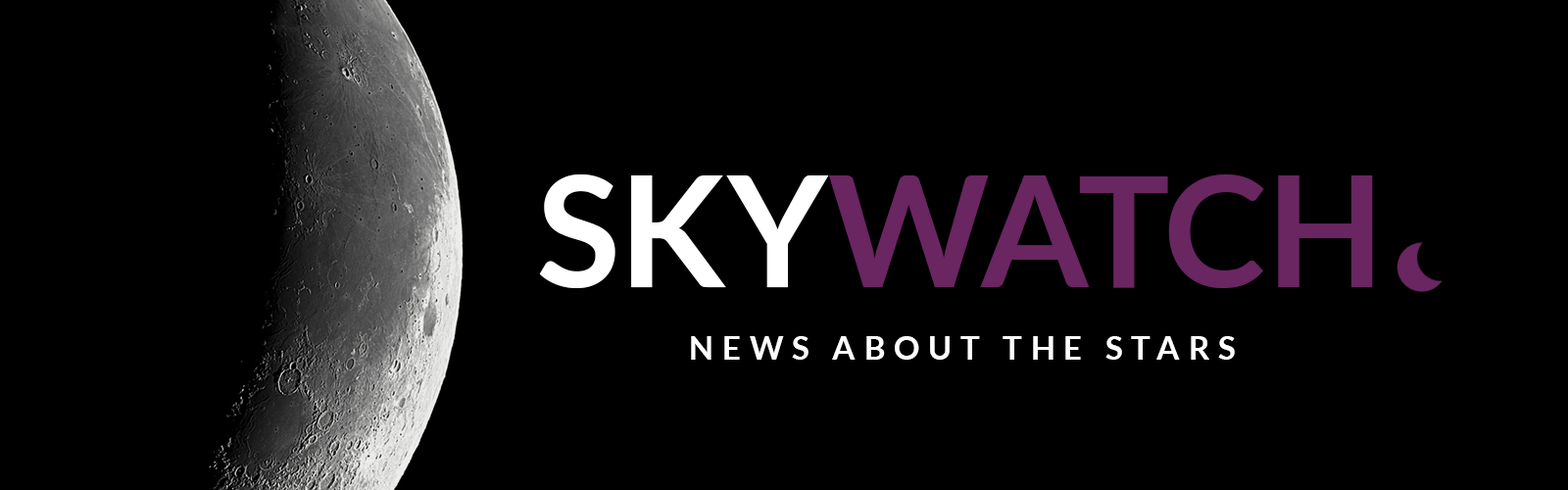
<style>
.page{position:relative;width:1568px;height:490px;background:#000000}
.page>*{position:absolute;margin:0}
.t1{font:154.2px "Lato-Bold";color:#692661}
.t2{font:154.2px "Lato-Bold";color:#ffffff}
.t3{font:32.5px "Lato-Bold";letter-spacing:0.26em;color:#ffffff}
</style>
<div class="page">
<p class="t1" style="left:539px;top:174px;width:834px;height:114px"><span class="t2">SKY</span>WATCH</p>
<p class="t3" style="left:691px;top:336px;width:544px;height:24px">NEWS ABOUT THE STARS</p>
</div>
